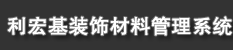
<style>
.page{position:relative;width:233px;height:50px;background:#333333}
.page>*{position:absolute;margin:0}
.t1{font:20px "FZHTJW--GB1-0";color:#ffffff;font-weight:bold}
</style>
<div class="page">
<p class="t1" style="left:7px;top:16px;width:225px;height:20px">利宏基装饰材料管理系统</p>
</div>
